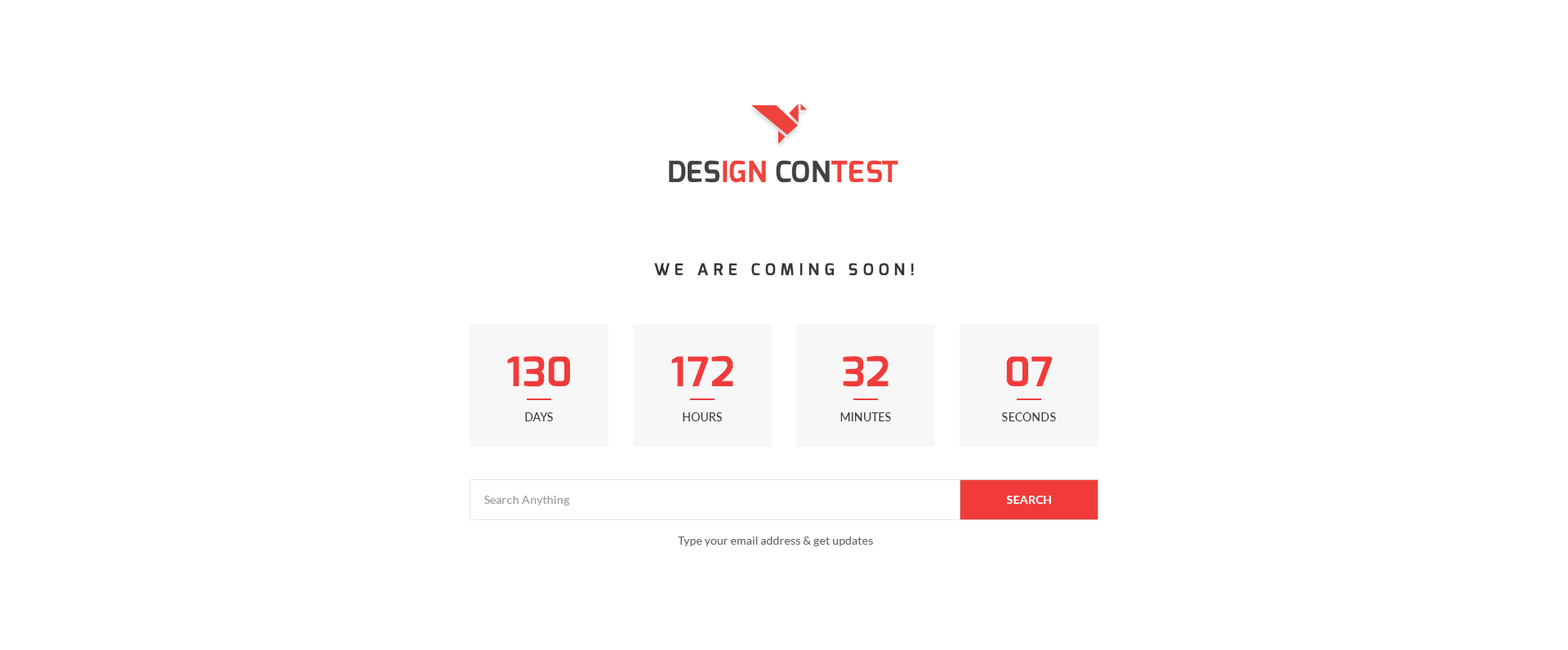
<style>
.page{position:relative;width:1568px;height:650px;background:#ffffff}
.page>*{position:absolute;margin:0}
.t1{font:29.2px "Exo-Bold";letter-spacing:0.012em;color:#f0423c;text-transform:uppercase}
.t2{font:29.2px "Exo-Bold";letter-spacing:0.012em;color:#424242;text-transform:uppercase}
.t3{font:16.3px "Exo-Bold";letter-spacing:0.3em;color:#363636;text-transform:uppercase}
.t4{font:40.8px "Exo-Bold";letter-spacing:0.012em;color:#f13b3b}
.t5{font:11.4px "Lato-Medium";letter-spacing:0.012em;color:#363b3f;text-transform:uppercase}
.t6{font:11.4px "Lato-Regular";letter-spacing:0.012em;color:#999999}
.t7{font:11.4px "Lato-Bold";letter-spacing:0.012em;color:#ffffff;text-transform:uppercase}
.t8{font:11.4px "Lato-Regular";letter-spacing:0.012em;color:#666666}
</style>
<div class="page">
<p class="t1" style="left:669px;top:160px;width:229px;height:23px"><span class="t2">Des</span>ign <span class="t2">Con</span>test</p>
<p class="t3" style="left:654px;top:263px;width:260px;height:13px">We are Coming soon!</p>
<p class="t4" style="left:507px;top:356px;width:63px;height:31px">130</p>
<p class="t4" style="left:671px;top:356px;width:62px;height:30px">172</p>
<p class="t4" style="left:843px;top:356px;width:46px;height:31px">32</p>
<p class="t4" style="left:1006px;top:356px;width:47px;height:30px">07</p>
<p class="t5" style="left:525px;top:412px;width:28px;height:9px">DAYS</p>
<p class="t5" style="left:683px;top:412px;width:39px;height:9px">Hours</p>
<p class="t5" style="left:840px;top:412px;width:51px;height:9px">Minutes</p>
<p class="t5" style="left:1001px;top:412px;width:55px;height:9px">seconds</p>
<p class="t6" style="left:484px;top:496px;width:86px;height:10px">Search Anything</p>
<p class="t7" style="left:1006px;top:496px;width:45px;height:8px">SEARCH</p>
<p class="t8" style="left:678px;top:537px;width:195px;height:9px">Type your email address &amp; get updates</p>
</div>
